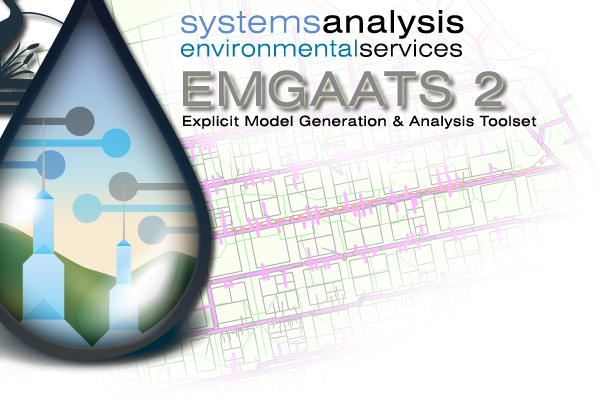
<style>
.page{position:relative;width:600px;height:400px}
.page>*{position:absolute;margin:0}
.t1{font:31.4px "Swiss721BT-RomanExtended";letter-spacing:0.04em;color:#000000}
.t2{font:31.4px "Swiss721BT-LightExtended";letter-spacing:0.04em;color:#608bc7}
.t3{font:23.2px "Swiss721BT-LightExtended";letter-spacing:0.04em;color:#0075a0}
.t4{font:23.2px "Swiss721BT-LightExtended";letter-spacing:0.04em;color:#000000}
.t5{font:48px "Swiss721BT-RomanExtended";letter-spacing:0.04em;color:#888888}
.t6{font:14px "Swiss721BT-RomanExtended";letter-spacing:0.04em;color:#000000}
</style>
<div class="page">
<p class="t1" style="left:181px;top:10px;width:283px;height:29px"><span class="t2">systems</span>analysis</p>
<p class="t3" style="left:181px;top:39px;width:281px;height:18px">environmental<span class="t4">services</span></p>
<p class="t5" style="left:183px;top:70px;width:319px;height:37px">EMGAATS 2</p>
<p class="t6" style="left:183px;top:115px;width:354px;height:14px">Explicit Model Generation &amp; Analysis Toolset</p>
</div>
